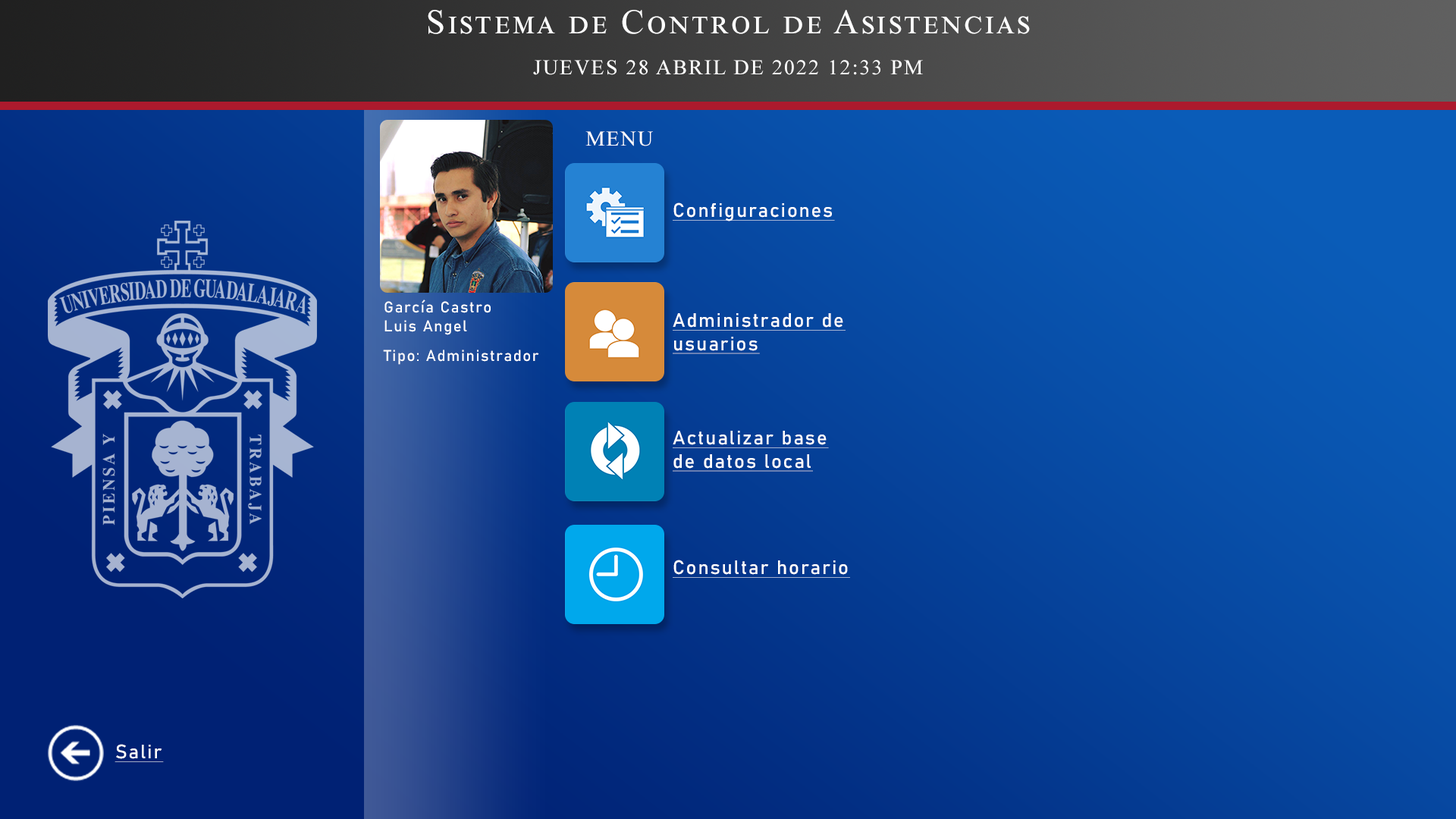
<style>
.page{position:relative;width:1456px;height:819px}
.page>*{position:absolute;margin:0}
.t1{font:34.7px "TimesNewRomanPSMT";letter-spacing:0.075em;color:#ffffff;font-variant:small-caps}
.t2{font:57.8px "Bahnschrift";letter-spacing:0.075em;color:#ffffff}
.t3{font:21.2px "TimesNewRomanPSMT";letter-spacing:0.075em;color:#ffffff;font-variant:small-caps}
.t4{font:19.3px "Bahnschrift";letter-spacing:0.075em;color:#ffffff;text-decoration:underline}
.t5{font:15.4px "Bahnschrift";letter-spacing:0.075em;color:#ffffff}
</style>
<div class="page">
<p class="t1" style="left:428px;top:10px;width:602px;height:24px;text-align:center">Sistema de Control de Asistencias<br><span class="t2">rtyh</span></p>
<p class="t3" style="left:533px;top:60px;width:390px;height:15px;text-align:center">JUEVES 28 ABRIL DE 2022 12:33 PM<br><span class="t2">rtyh</span></p>
<p class="t3" style="left:585px;top:131px;width:68px;height:15px">MENU</p>
<p class="t4" style="left:673px;top:202px;width:162px;height:19px">Configuraciones</p>
<p class="t5" style="left:384px;top:300px;width:107px;height:35px">García Castro<br>Luis Angel</p>
<p class="t4" style="left:673px;top:313px;width:173px;height:41px">Administrador de<br>usuarios</p>
<p class="t5" style="left:383px;top:350px;width:156px;height:15px">Tipo: Administrador</p>
<p class="t4" style="left:673px;top:431px;width:156px;height:41px">Actualizar base de datos local</p>
<p class="t4" style="left:673px;top:560px;width:177px;height:18px">Consultar horario</p>
<p class="t4" style="left:115px;top:744px;width:49px;height:18px">Salir</p>
</div>
